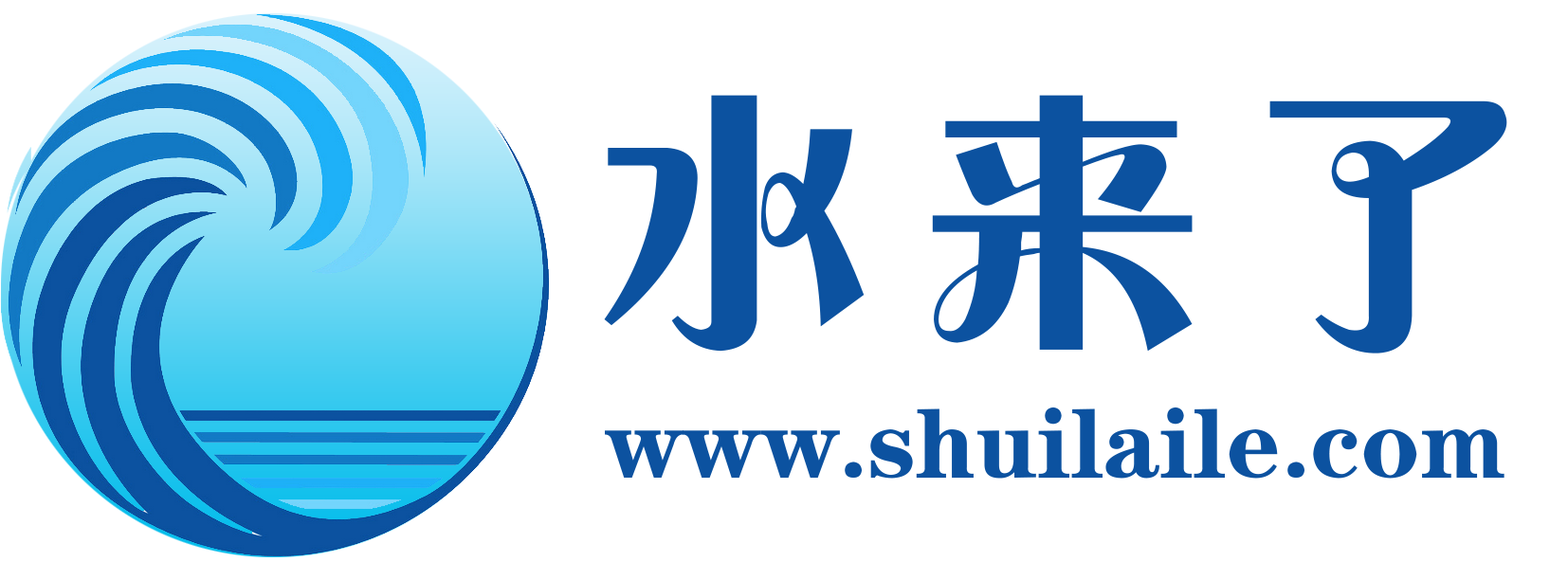
<style>
.page{position:relative;width:1568px;height:580px;background:#ffffff}
.page>*{position:absolute;margin:0}
.t1{font:298.2px "FZCHYJW--GB1-0";letter-spacing:0.1em;color:#0c52a0}
.t2{font:100.6px "Jcusong";color:#0c52a0}
</style>
<div class="page">
<p class="t1" style="left:604px;top:95px;width:903px;height:259px">水来了</p>
<p class="t2" style="left:605px;top:407px;width:899px;height:72px">www.shuilaile.com</p>
</div>
